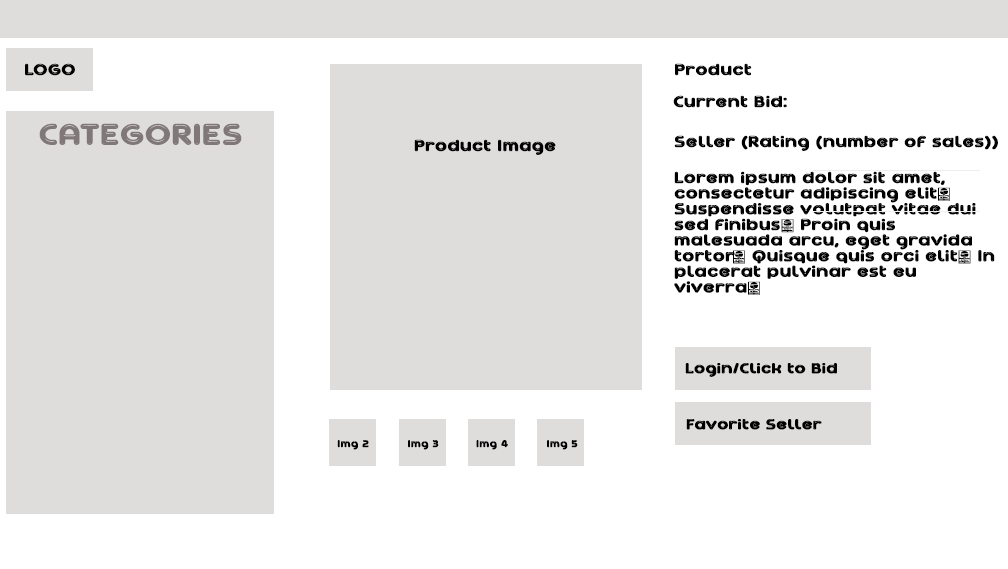
<style>
.page{position:relative;width:1008px;height:569px;background:#ffffff}
.page>*{position:absolute;margin:0}
.t1{font:15.3px "AgetaChubbyDemo";color:#000000;font-weight:bold;scale:1.15 1}
.t2{font:28.1px "AgetaChubbyDemo";color:#807777;font-weight:bold;scale:1.15 1}
.t3{font:14px "AgetaChubbyDemo";color:#000000;font-weight:bold;scale:1.15 1}
.t4{font:9.4px "AgetaChubbyDemo";color:#000000;font-weight:bold;scale:1.15 1}
</style>
<div class="page">
<p class="t1" style="left:25px;top:63px;width:50px;height:13px">LOGO</p>
<p class="t1" style="left:675px;top:63px;width:77px;height:13px">Product</p>
<p class="t1" style="left:673px;top:95px;width:114px;height:13px">Current Bid:</p>
<p class="t2" style="left:39px;top:123px;width:203px;height:22px">CATEGORIES</p>
<p class="t1" style="left:674px;top:135px;width:324px;height:16px">Seller (Rating (number of sales))</p>
<p class="t1" style="left:414px;top:139px;width:142px;height:16px">Product Image</p>
<p class="t1" style="left:674px;top:171px;width:321px;height:124px">Lorem ipsum dolor sit amet,<br>consectetur adipiscing elit. <br>Suspendisse volutpat vitae dui <br>sed finibus. Proin quis <br>malesuada arcu, eget gravida <br>tortor. Quisque quis orci elit. In<br>placerat pulvinar est eu <br>viverra.</p>
<p class="t3" style="left:685px;top:363px;width:152px;height:14px">Login/Click to Bid</p>
<p class="t3" style="left:686px;top:419px;width:136px;height:11px">Favorite Seller</p>
<p class="t4" style="left:337px;top:440px;width:32px;height:10px">Img 2</p>
<p class="t4" style="left:408px;top:440px;width:31px;height:10px">Img 3</p>
<p class="t4" style="left:476px;top:440px;width:32px;height:10px">Img 4</p>
<p class="t4" style="left:547px;top:440px;width:31px;height:10px">Img 5</p>
</div>
